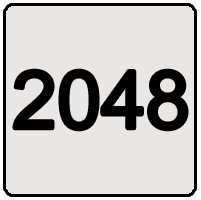
<style>
.page{position:relative;width:201px;height:200px;background:#e9e7e5}
.page>*{position:absolute;margin:0}
.t1{font:80px "ArialMT";color:#010101}
</style>
<div class="page">
<p class="t1" style="left:14px;top:70px;width:173px;height:60px">2048</p>
</div>
